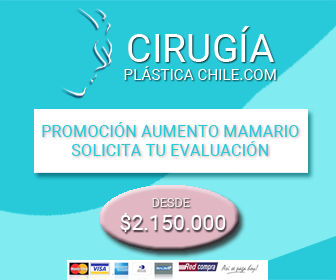
<style>
.page{position:relative;width:336px;height:280px;background:#28cada}
.page>*{position:absolute;margin:0}
.t1{font:15.3px "Roboto-Regular";color:#ffffff}
.t2{font:39.1px "Roboto-Regular";color:#ffffff}
.t3{font:16.5px "Roboto-Regular";color:#28cada}
.t4{font:12.6px "Roboto-Regular";color:#f0eaea}
.t5{font:21.3px "Roboto-Regular";color:#ffffff}
</style>
<div class="page">
<p class="t1" style="left:124px;top:26px;width:152px;height:54px;text-align:center"><span class="t2">CIRUGÍA<br></span>PLÁSTICA CHILE.COM</p>
<p class="t3" style="left:42px;top:122px;width:257px;height:34px;text-align:center">PROMOCIÓN AUMENTO MAMARIO<br>SOLICITA TU EVALUACIÓN</p>
<p class="t4" style="left:152px;top:198px;width:38px;height:9px">DESDE</p>
<p class="t5" style="left:120px;top:213px;width:106px;height:19px">$2.150.000</p>
</div>
